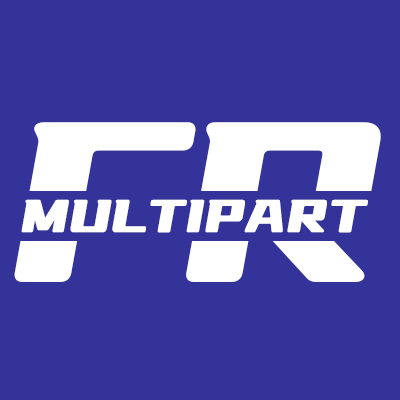
<style>
.page{position:relative;width:400px;height:400px;background:#333399}
.page>*{position:absolute;margin:0}
.t1{font:67.1px "YouSheBiaoTiYuan";letter-spacing:-0.125em;color:#ffffff;font-weight:bold;font-style:italic}
.t2{font:56.2px "YouSheBiaoTiYuan";letter-spacing:-0.05em;color:#ffffff;font-weight:bold;font-style:italic}
</style>
<div class="page">
<p class="t1" style="left:14px;top:122px;width:367px;height:160px">FR</p>
<p class="t2" style="left:21px;top:199px;width:347px;height:34px">MULTIPART</p>
</div>
